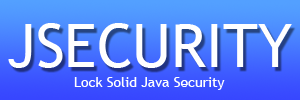
<style>
.page{position:relative;width:300px;height:100px}
.page>*{position:absolute;margin:0}
.t1{font:60px "TrebuchetMS";color:#ffffff}
.t2{font:14px "TrebuchetMS";color:#ffffff}
</style>
<div class="page">
<p class="t1" style="left:8px;top:23px;width:284px;height:45px">JSECURITY</p>
<p class="t2" style="left:74px;top:77px;width:151px;height:13px">Lock Solid Java Security</p>
</div>
